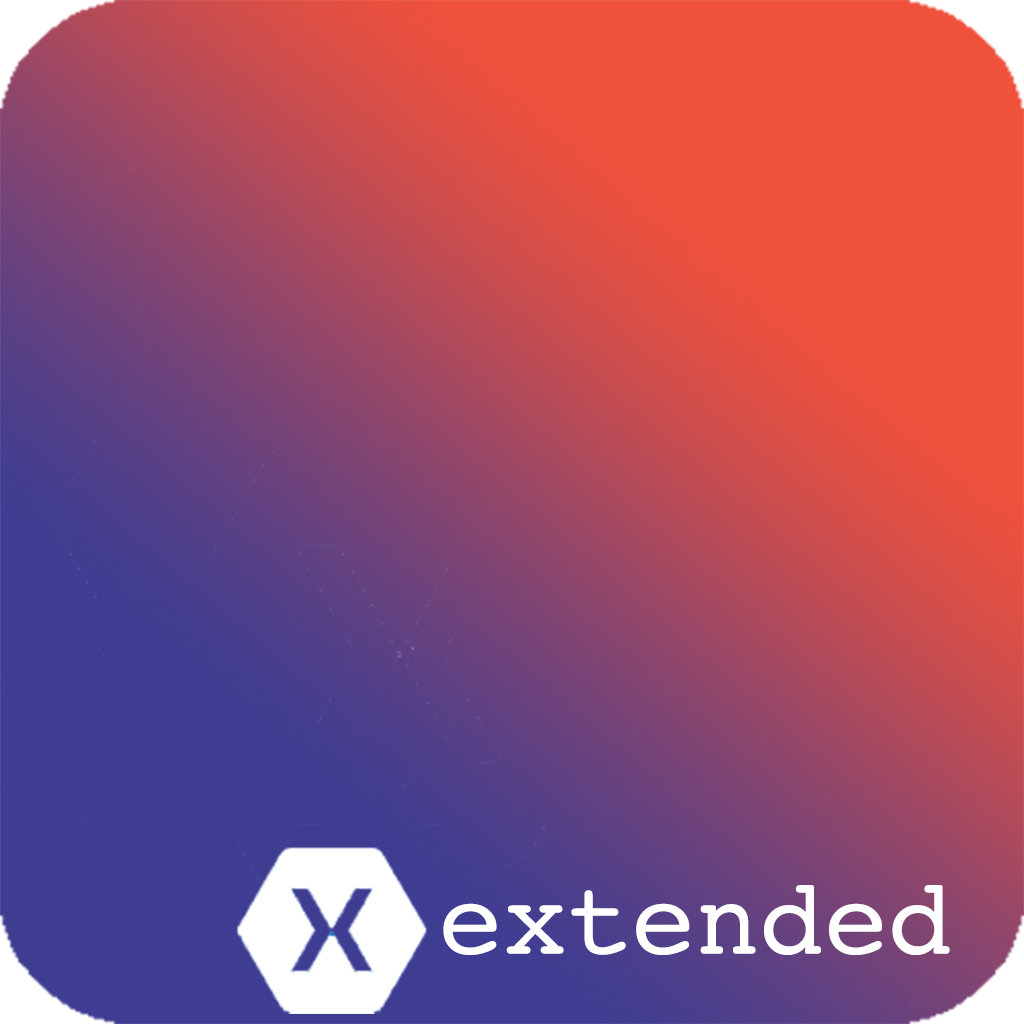
<style>
.page{position:relative;width:1024px;height:1024px}
.page>*{position:absolute;margin:0}
.t1{font:107.1px "Courier";color:#ffffff}
</style>
<div class="page">
<p class="t1" style="left:443px;top:885px;width:507px;height:70px">extended</p>
</div>
